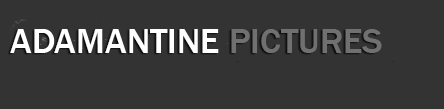
<style>
.page{position:relative;width:444px;height:109px;background:#333333}
.page>*{position:absolute;margin:0}
.t1{font:36px "FranklinGothic-Medium";color:#ffffff}
.t2{font:36px "FranklinGothic-Medium";color:#707070}
</style>
<div class="page">
<p class="t1" style="left:10px;top:29px;width:372px;height:24px">ADAMANTINE <span class="t2">PICTURES</span></p>
</div>
